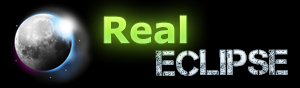
<style>
.page{position:relative;width:300px;height:88px;background:#000000}
.page>*{position:absolute;margin:0}
.t1{font:36px "Verdana-Bold"}
.t2{font:36px "Captureit"}
</style>
<div class="page">
<p class="t1" style="left:104px;top:15px;width:83px;height:29px">Real</p>
<p class="t2" style="left:155px;top:49px;width:133px;height:27px">Eclipse</p>
</div>
